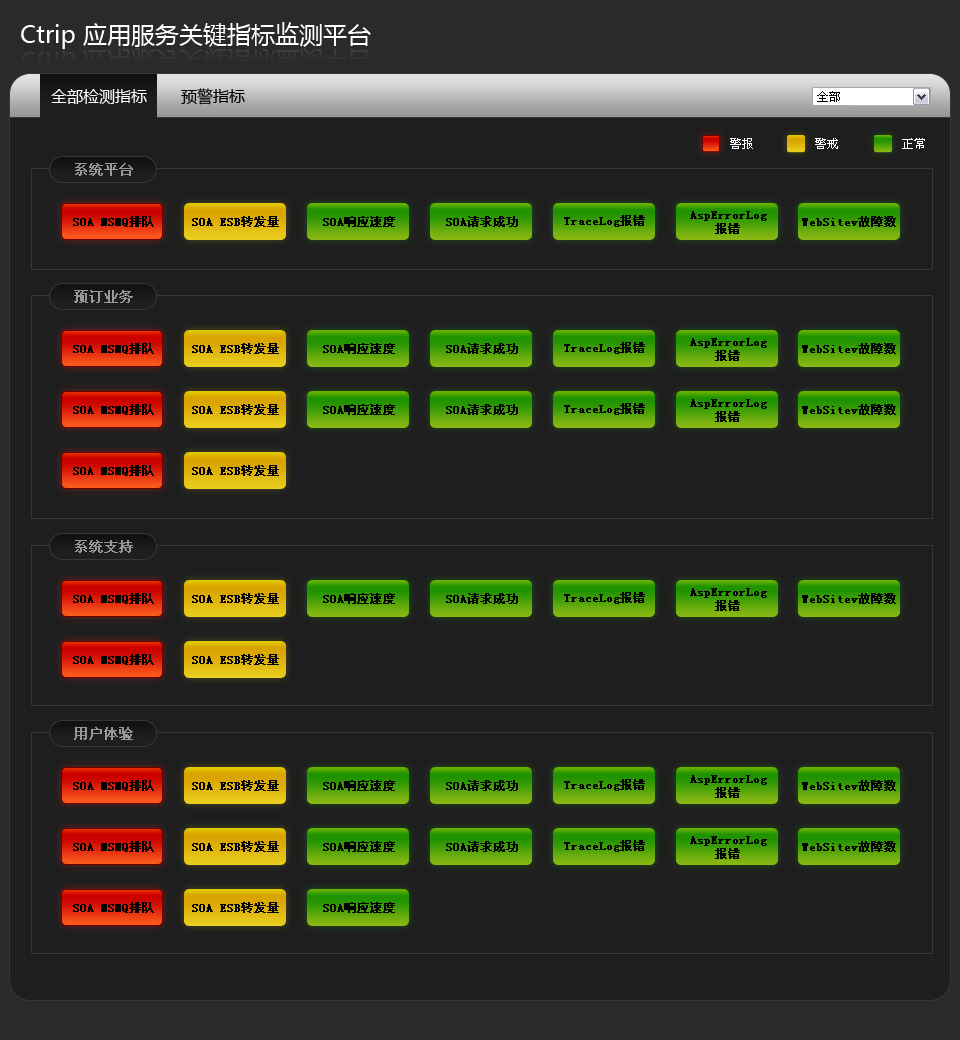
<style>
.page{position:relative;width:960px;height:1040px;background:#1e1e1e}
.page>*{position:absolute;margin:0}
.t1{font:24px "MicrosoftYaHei";color:#ffffff}
.t2{font:16px "MicrosoftYaHei";color:#ffffff}
.t3{font:16px "MicrosoftYaHei";color:#000000}
.t4{font:12.2px "SimSun";color:#000000}
.t5{font:12.1px "SimSun";color:#ffffff}
.t6{font:14.3px "SimSun";color:#979797;font-weight:bold}
.t7{font:12.2px "SimSun";color:#000000;font-weight:bold}
.t8{font:12.4px "SimSun";color:#000000;font-weight:bold}
.t9{font:14.4px "SimSun";color:#979797;font-weight:bold}
</style>
<div class="page">
<p class="t1" style="left:21px;top:22px;width:350px;height:27px">Ctrip 应用服务关键指标监测平台</p>
<p class="t2" style="left:51px;top:89px;width:96px;height:15px">全部检测指标</p>
<p class="t2" style="left:51px;top:89px;width:96px;height:15px">全部检测指标</p>
<p class="t3" style="left:181px;top:88px;width:64px;height:17px">预警指标</p>
<p class="t4" style="left:817px;top:91px;width:23px;height:11px">全部</p>
<p class="t5" style="left:730px;top:138px;width:23px;height:11px">警报</p>
<p class="t5" style="left:815px;top:138px;width:23px;height:11px">警戒</p>
<p class="t5" style="left:902px;top:138px;width:23px;height:11px">正常</p>
<p class="t6" style="left:75px;top:163px;width:58px;height:13px">系统平台</p>
<p class="t7" style="left:73px;top:216px;width:81px;height:11px">SOA MSMQ排队</p>
<p class="t8" style="left:192px;top:216px;width:87px;height:11px">SOA ESB转发量</p>
<p class="t7" style="left:323px;top:216px;width:72px;height:11px">SOA响应速度</p>
<p class="t7" style="left:446px;top:216px;width:72px;height:11px">SOA请求成功</p>
<p class="t7" style="left:564px;top:215px;width:81px;height:12px">TraceLog报错</p>
<p class="t7" style="left:690px;top:211px;width:77px;height:23px;text-align:center">AspErrorLog<br>报错</p>
<p class="t7" style="left:802px;top:216px;width:94px;height:11px">WebSitev故障数</p>
<p class="t9" style="left:74px;top:290px;width:59px;height:13px">预订业务</p>
<p class="t7" style="left:564px;top:342px;width:81px;height:12px">TraceLog报错</p>
<p class="t7" style="left:690px;top:338px;width:77px;height:23px;text-align:center">AspErrorLog<br>报错</p>
<p class="t7" style="left:73px;top:343px;width:81px;height:11px">SOA MSMQ排队</p>
<p class="t8" style="left:192px;top:343px;width:87px;height:11px">SOA ESB转发量</p>
<p class="t7" style="left:323px;top:343px;width:72px;height:11px">SOA响应速度</p>
<p class="t7" style="left:446px;top:343px;width:72px;height:11px">SOA请求成功</p>
<p class="t7" style="left:802px;top:343px;width:94px;height:11px">WebSitev故障数</p>
<p class="t7" style="left:690px;top:399px;width:77px;height:23px;text-align:center">AspErrorLog<br>报错</p>
<p class="t7" style="left:73px;top:404px;width:81px;height:11px">SOA MSMQ排队</p>
<p class="t8" style="left:192px;top:404px;width:87px;height:11px">SOA ESB转发量</p>
<p class="t7" style="left:323px;top:404px;width:72px;height:11px">SOA响应速度</p>
<p class="t7" style="left:446px;top:404px;width:72px;height:11px">SOA请求成功</p>
<p class="t7" style="left:564px;top:403px;width:81px;height:12px">TraceLog报错</p>
<p class="t7" style="left:802px;top:404px;width:94px;height:11px">WebSitev故障数</p>
<p class="t7" style="left:73px;top:465px;width:81px;height:11px">SOA MSMQ排队</p>
<p class="t8" style="left:192px;top:465px;width:87px;height:11px">SOA ESB转发量</p>
<p class="t9" style="left:75px;top:540px;width:58px;height:13px">系统支持</p>
<p class="t7" style="left:73px;top:593px;width:81px;height:11px">SOA MSMQ排队</p>
<p class="t8" style="left:192px;top:593px;width:87px;height:11px">SOA ESB转发量</p>
<p class="t7" style="left:323px;top:593px;width:72px;height:11px">SOA响应速度</p>
<p class="t7" style="left:446px;top:593px;width:72px;height:11px">SOA请求成功</p>
<p class="t7" style="left:564px;top:592px;width:81px;height:12px">TraceLog报错</p>
<p class="t7" style="left:690px;top:588px;width:77px;height:23px;text-align:center">AspErrorLog<br>报错</p>
<p class="t7" style="left:802px;top:593px;width:94px;height:11px">WebSitev故障数</p>
<p class="t7" style="left:73px;top:654px;width:81px;height:11px">SOA MSMQ排队</p>
<p class="t8" style="left:192px;top:654px;width:87px;height:11px">SOA ESB转发量</p>
<p class="t9" style="left:74px;top:727px;width:59px;height:13px">用户体验</p>
<p class="t7" style="left:73px;top:780px;width:81px;height:11px">SOA MSMQ排队</p>
<p class="t8" style="left:192px;top:780px;width:87px;height:11px">SOA ESB转发量</p>
<p class="t7" style="left:323px;top:780px;width:72px;height:11px">SOA响应速度</p>
<p class="t7" style="left:446px;top:780px;width:72px;height:11px">SOA请求成功</p>
<p class="t7" style="left:564px;top:779px;width:81px;height:12px">TraceLog报错</p>
<p class="t7" style="left:690px;top:775px;width:77px;height:23px;text-align:center">AspErrorLog<br>报错</p>
<p class="t7" style="left:802px;top:780px;width:94px;height:11px">WebSitev故障数</p>
<p class="t7" style="left:73px;top:841px;width:81px;height:11px">SOA MSMQ排队</p>
<p class="t8" style="left:192px;top:841px;width:87px;height:11px">SOA ESB转发量</p>
<p class="t7" style="left:323px;top:841px;width:72px;height:11px">SOA响应速度</p>
<p class="t7" style="left:446px;top:841px;width:72px;height:11px">SOA请求成功</p>
<p class="t7" style="left:564px;top:840px;width:81px;height:12px">TraceLog报错</p>
<p class="t7" style="left:690px;top:836px;width:77px;height:23px;text-align:center">AspErrorLog<br>报错</p>
<p class="t7" style="left:802px;top:841px;width:94px;height:11px">WebSitev故障数</p>
<p class="t7" style="left:73px;top:902px;width:81px;height:11px">SOA MSMQ排队</p>
<p class="t8" style="left:192px;top:902px;width:87px;height:11px">SOA ESB转发量</p>
<p class="t7" style="left:323px;top:902px;width:72px;height:11px">SOA响应速度</p>
</div>
